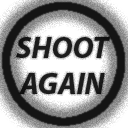
<style>
.page{position:relative;width:128px;height:128px}
.page>*{position:absolute;margin:0}
.t1{font:30px "MyriadPro-BoldIt";color:#1c1c1c}
</style>
<div class="page">
<p class="t1" style="left:16px;top:37px;width:94px;height:57px;text-align:center">SHOOT<br>AGAIN</p>
</div>
